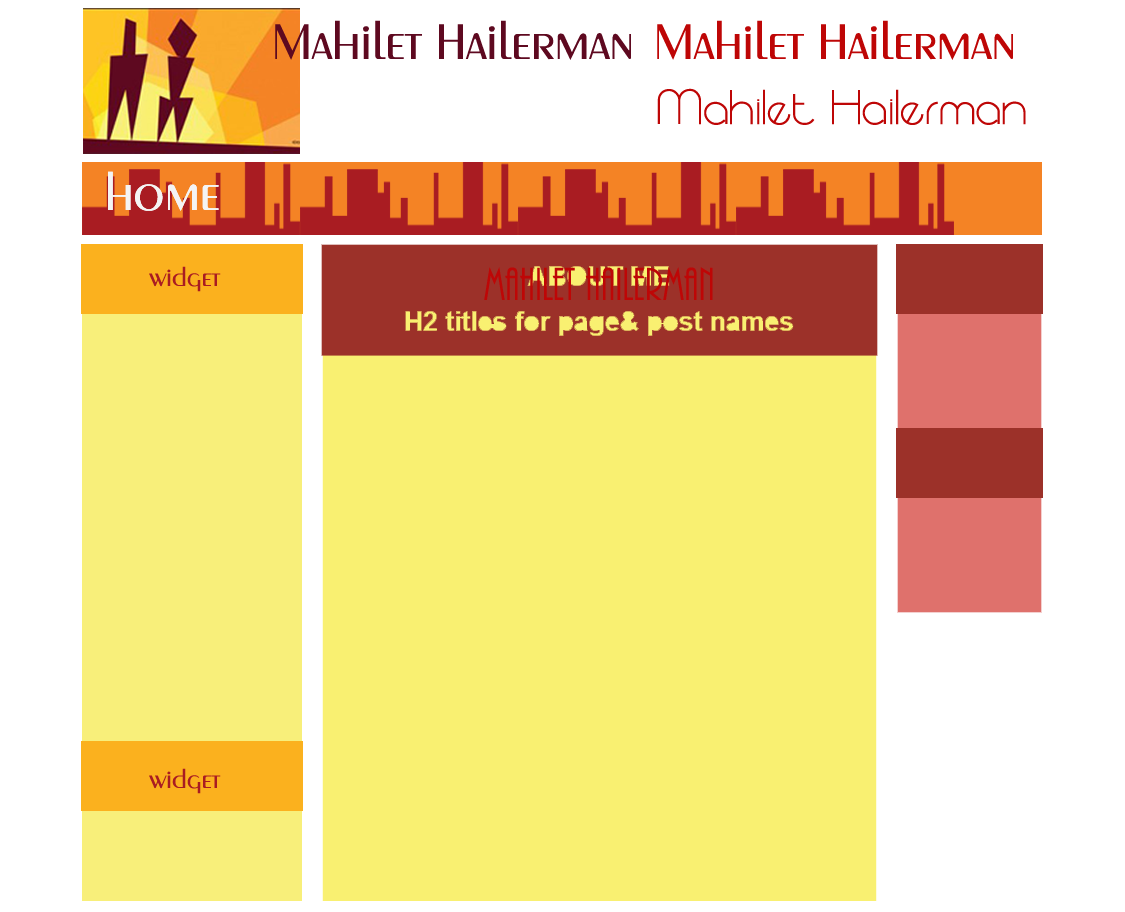
<style>
.page{position:relative;width:1125px;height:912px;background:#ffffff}
.page>*{position:absolute;margin:0}
.t1{font:48px "PenultimateLight";color:#5e0920}
.t2{font:48px "PenultimateLight";color:#be0606}
.t3{font:48px "Moonbeam";color:#be0606}
.t4{font:48px "PenultimateLight";color:#f4f4f4}
.t5{font:24px "PenultimateLight";color:#a91c22}
.t6{font:48px "ARBONNIE";color:#be0606}
</style>
<div class="page">
<p class="t1" style="left:275px;top:20px;width:356px;height:40px">Mahilet Hailerman</p>
<p class="t2" style="left:657px;top:20px;width:356px;height:40px">Mahilet Hailerman</p>
<p class="t3" style="left:657px;top:88px;width:369px;height:37px">Mahilet Hailerman</p>
<p class="t4" style="left:108px;top:171px;width:111px;height:40px">home</p>
<p class="t4" style="left:108px;top:171px;width:111px;height:40px">home</p>
<p class="t5" style="left:149px;top:266px;width:72px;height:26px">widget</p>
<p class="t6" style="left:484px;top:267px;width:229px;height:33px">Mahilet Hailerman</p>
<p class="t5" style="left:149px;top:768px;width:72px;height:26px">widget</p>
</div>
